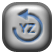
<style>
.page{position:relative;width:55px;height:55px;background:#ffffff}
.page>*{position:absolute;margin:0}
.t1{font:12px "ArialMT"}
</style>
<div class="page">
<p class="t1" style="left:20px;top:24px;width:15px;height:9px">YZ</p>
</div>
